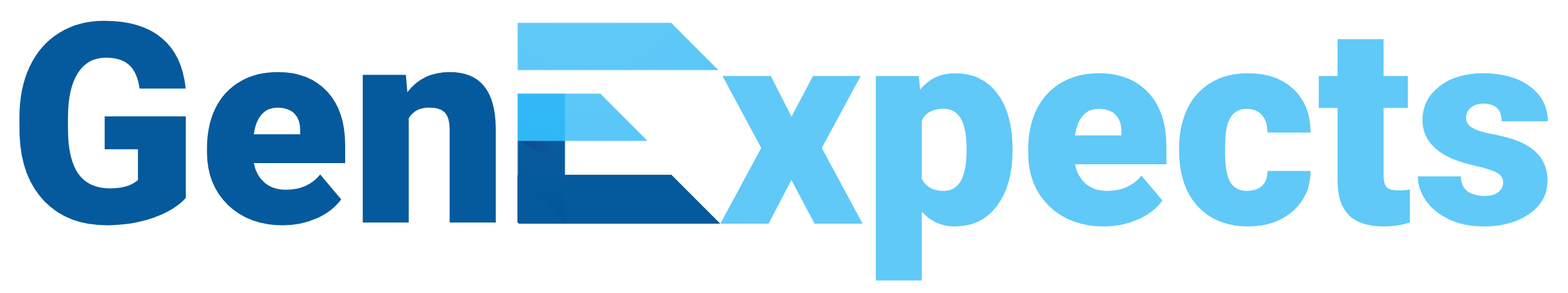
<style>
.page{position:relative;width:1568px;height:293px;background:#ffffff}
.page>*{position:absolute;margin:0}
.t1{font:279.4px "Roboto-Black";color:#055a9d}
.t2{font:279.4px "Roboto-Black";color:#60c9f8}
</style>
<div class="page">
<p class="t1" style="left:19px;top:20px;width:477px;height:205px">Gen</p>
<p class="t2" style="left:720px;top:39px;width:828px;height:242px">xpects</p>
</div>
